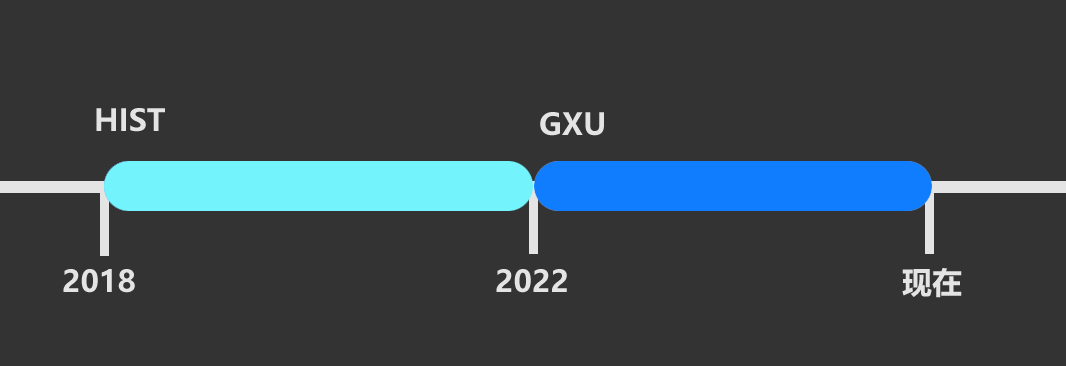
<style>
.page{position:relative;width:1066px;height:366px;background:#333333}
.page>*{position:absolute;margin:0}
.t1{font:30px "MicrosoftYaHei-Bold";color:#e4e4e4}
</style>
<div class="page">
<p class="t1" style="left:96px;top:108px;width:69px;height:24px">HIST</p>
<p class="t1" style="left:540px;top:112px;width:64px;height:24px">GXU</p>
<p class="t1" style="left:63px;top:269px;width:72px;height:24px">2018</p>
<p class="t1" style="left:496px;top:269px;width:71px;height:24px">2022</p>
<p class="t1" style="left:902px;top:268px;width:60px;height:30px">现在</p>
</div>
